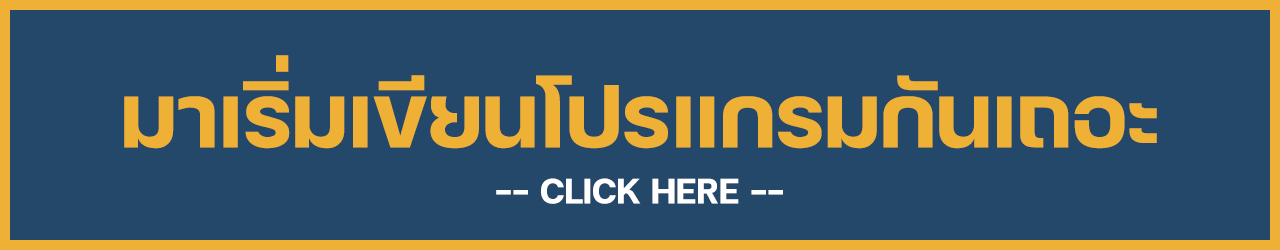
<style>
.page{position:relative;width:1280px;height:250px;background:#23486a}
.page>*{position:absolute;margin:0}
.t1{font:120px "FCMinimalBold";color:#efb036}
.t2{font:48px "FCMinimalBold";color:#ffffff}
</style>
<div class="page">
<p class="t1" style="left:124px;top:55px;width:1033px;height:94px">มาเริ่มเขียนโปรแกรมกันเถอะ</p>
<p class="t2" style="left:496px;top:178px;width:287px;height:26px">-- CLICK HERE --</p>
</div>
